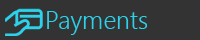
<style>
.page{position:relative;width:200px;height:40px;background:#333333}
.page>*{position:absolute;margin:0}
.t1{font:25px "SegoeUI-Semilight";color:#2cd1ea}
</style>
<div class="page">
<p class="t1" style="left:47px;top:11px;width:101px;height:24px">Payments</p>
</div>
